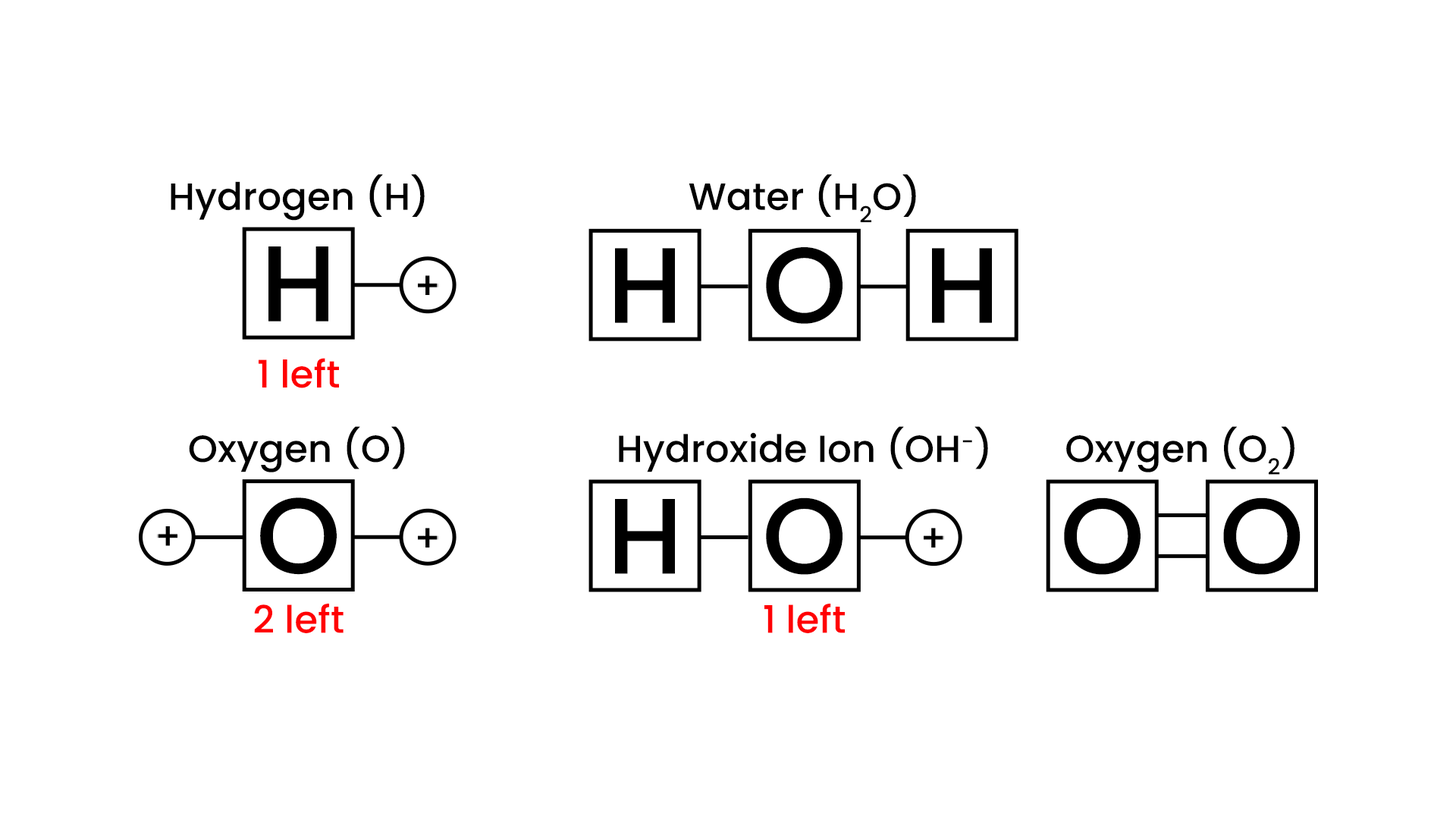
<style>
.page{position:relative;width:1456px;height:819px;background:#ffffff}
.page>*{position:absolute;margin:0}
.t1{font:37.9px "Poppins-Medium";color:#000000}
.t2{font:107.3px "Poppins-Medium";color:#000000}
.t3{font:37.9px "Poppins-Medium";color:#ff0003}
</style>
<div class="page">
<p class="t1" style="left:171px;top:174px;width:254px;height:47px">Hydrogen (H)</p>
<p class="t1" style="left:689px;top:174px;width:227px;height:48px">Water (H2O)</p>
<p class="t2" style="left:268px;top:246px;width:60px;height:76px">H</p>
<p class="t2" style="left:615px;top:248px;width:60px;height:75px">H</p>
<p class="t2" style="left:766px;top:247px;width:76px;height:77px">O</p>
<p class="t2" style="left:932px;top:248px;width:60px;height:75px">H</p>
<p class="t3" style="left:259px;top:358px;width:80px;height:30px">1 left</p>
<p class="t1" style="left:189px;top:426px;width:216px;height:46px">Oxygen (O)</p>
<p class="t1" style="left:619px;top:426px;width:369px;height:46px">Hydroxide Ion (OH-)</p>
<p class="t1" style="left:1066px;top:426px;width:228px;height:49px">Oxygen (O2)</p>
<p class="t2" style="left:260px;top:497px;width:77px;height:78px">O</p>
<p class="t2" style="left:766px;top:497px;width:76px;height:78px">O</p>
<p class="t2" style="left:1064px;top:497px;width:77px;height:78px">O</p>
<p class="t2" style="left:1223px;top:497px;width:78px;height:78px">O</p>
<p class="t2" style="left:615px;top:499px;width:60px;height:75px">H</p>
<p class="t3" style="left:254px;top:604px;width:90px;height:29px">2 left</p>
<p class="t3" style="left:764px;top:604px;width:81px;height:29px">1 left</p>
</div>
